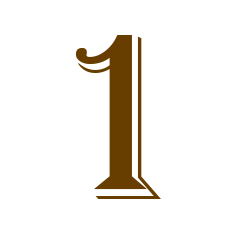
<style>
.page{position:relative;width:240px;height:240px;background:#ffffff}
.page>*{position:absolute;margin:0}
.t1{font:250px "Algerian";color:#683e00}
</style>
<div class="page">
<p class="t1" style="left:75px;top:35px;width:86px;height:164px">1</p>
</div>
